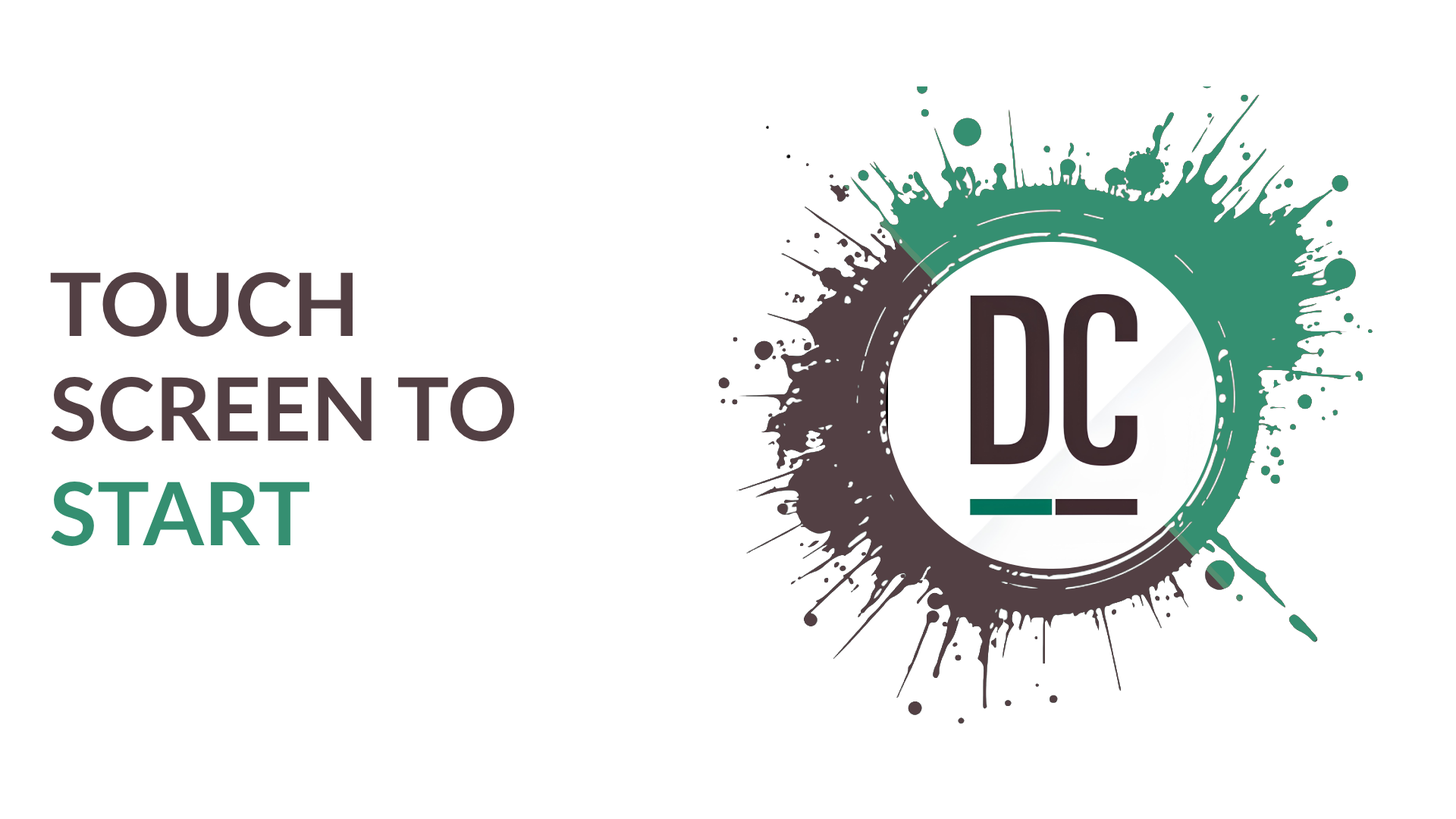
<style>
.page{position:relative;width:1456px;height:819px;background:#ffffff}
.page>*{position:absolute;margin:0}
.t1{font:87.2px "Lato-Bold";color:#534044}
.t2{font:87.2px "Lato-Bold";color:#358f71}
</style>
<div class="page">
<p class="t1" style="left:50px;top:271px;width:465px;height:275px">TOUCH SCREEN TO <span class="t2">START</span></p>
</div>
